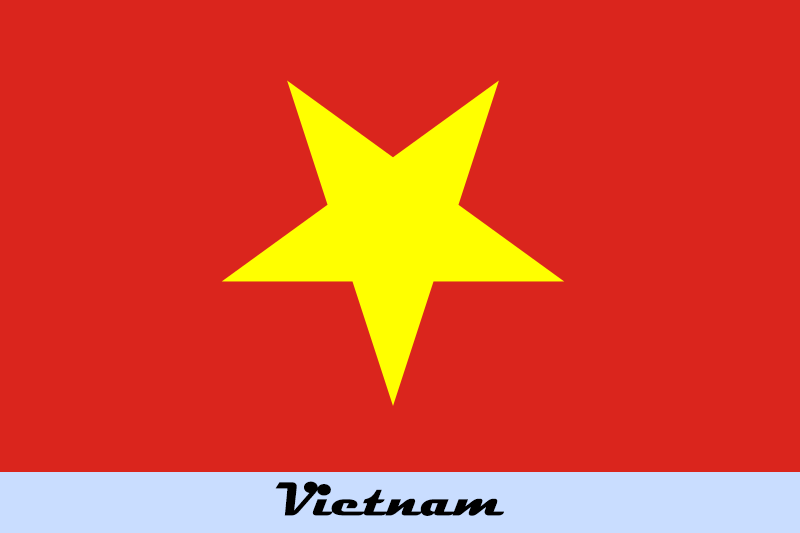
<style>
.page{position:relative;width:800px;height:533px;background:#da251d}
.page>*{position:absolute;margin:0}
.t1{font:48px "Magneto-Bold";color:#000000;scale:1.08 1}
</style>
<div class="page">
<p class="t1" style="left:275px;top:481px;width:229px;height:35px">Vietnam</p>
</div>
